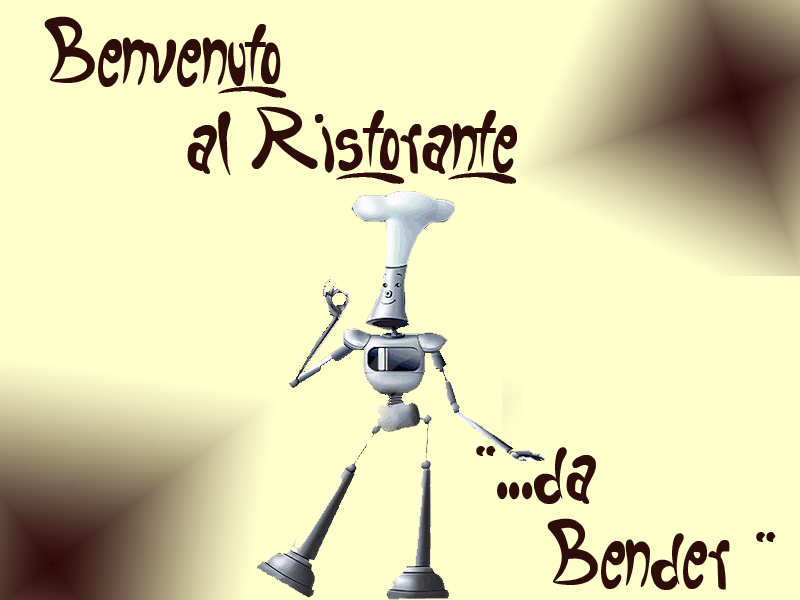
<style>
.page{position:relative;width:800px;height:600px;background:#ffffcc}
.page>*{position:absolute;margin:0}
.t1{font:72px "Fruitopia";color:#2d0c0a}
.t2{font:72px "extrahot";color:#2d0c0a}
</style>
<div class="page">
<p class="t1" style="left:44px;top:16px;width:473px;height:168px"><span class="t2">B</span>envenuto <br>    al <span class="t2">R</span>istorante</p>
</div>
